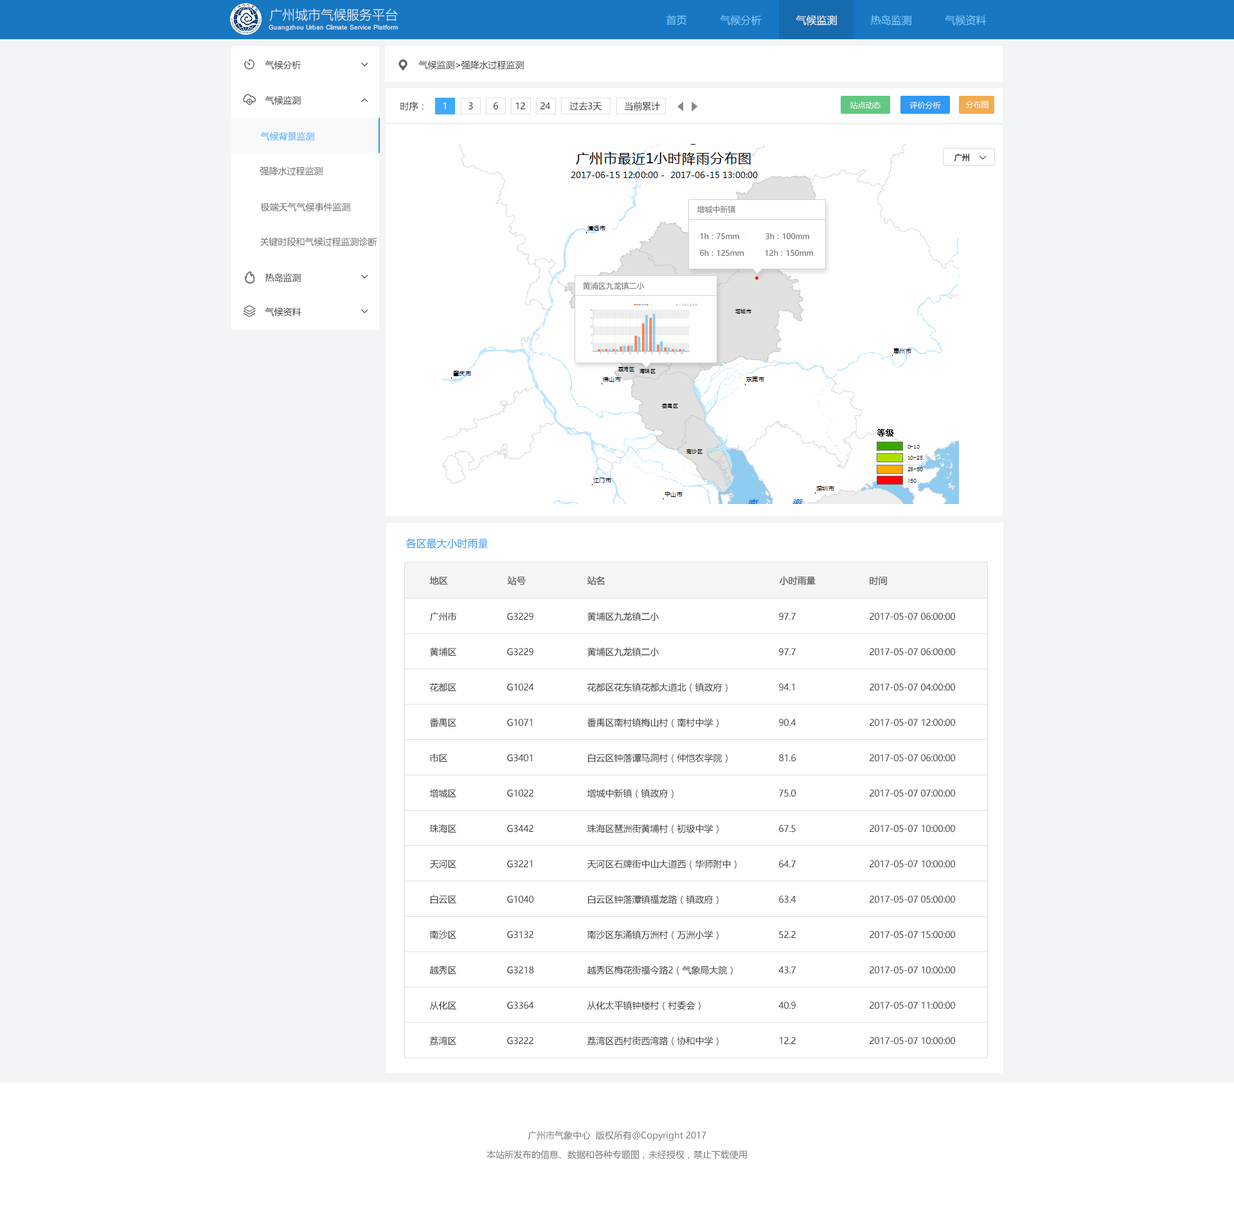
<style>
.page{position:relative;width:1234px;height:1206px;background:#f3f4f5}
.page>*{position:absolute;margin:0}
.t1{font:12.9px "MicrosoftYaHeiLight";color:#ffffff}
.t2{font:10.3px "MicrosoftYaHei";color:#80ceff}
.t3{font:10.3px "MicrosoftYaHei";color:#ffffff}
.t4{font:6.4px "ArialMT";color:#ffffff}
.t5{font:9px "MicrosoftYaHei";color:#333333}
.t6{font:7.7px "MicrosoftYaHei";color:#ffffff}
.t7{font:9px "MicrosoftYaHei";color:#ffffff}
.t8{font:9px "MicrosoftYaHei";color:#3fa9fe}
.t9{font:7.7px "MicrosoftYaHei";color:#333333;font-weight:bold}
.t10{font:9px "MicrosoftYaHei";color:#666666}
.t11{font:7.7px "MicrosoftYaHei";color:#666666}
.t12{font:10.3px "MicrosoftYaHei";color:#2e9af3}
.t13{font:9px "MicrosoftYaHei";color:#666666;font-weight:bold}
</style>
<div class="page">
<p class="t1" style="left:269px;top:8px;width:129px;height:13px">广州城市气候服务平台</p>
<p class="t2" style="left:667px;top:15px;width:20px;height:11px">首页</p>
<p class="t2" style="left:720px;top:15px;width:42px;height:11px">气候分析</p>
<p class="t3" style="left:796px;top:15px;width:41px;height:11px">气候监测</p>
<p class="t2" style="left:871px;top:15px;width:41px;height:11px">热岛监测</p>
<p class="t2" style="left:945px;top:15px;width:42px;height:11px">气候资料</p>
<p class="t4" style="left:269px;top:24px;width:129px;height:7px">Guangzhou Urban Climate Service Platform</p>
<p class="t5" style="left:265px;top:60px;width:37px;height:9px">气候分析</p>
<p class="t5" style="left:419px;top:60px;width:105px;height:9px">气候监测&gt;强降水过程监测</p>
<p class="t5" style="left:265px;top:96px;width:36px;height:9px">气候监测</p>
<p class="t5" style="left:401px;top:102px;width:23px;height:9px">时序：</p>
<p class="t5" style="left:570px;top:102px;width:32px;height:9px">过去3天</p>
<p class="t5" style="left:625px;top:102px;width:35px;height:9px">当前累计</p>
<p class="t6" style="left:850px;top:102px;width:31px;height:7px">站点动态</p>
<p class="t6" style="left:910px;top:101px;width:31px;height:8px">评价分析</p>
<p class="t6" style="left:966px;top:100px;width:23px;height:9px">分布图</p>
<p class="t7" style="left:443px;top:102px;width:3px;height:7px">1</p>
<p class="t5" style="left:469px;top:102px;width:4px;height:8px">3</p>
<p class="t5" style="left:494px;top:102px;width:4px;height:8px">6</p>
<p class="t5" style="left:516px;top:102px;width:9px;height:7px">12</p>
<p class="t5" style="left:541px;top:102px;width:10px;height:7px">24</p>
<p class="t8" style="left:260px;top:132px;width:54px;height:9px">气候背景监测</p>
<p class="t9" style="left:954px;top:154px;width:15px;height:7px">广州</p>
<p class="t10" style="left:260px;top:166px;width:63px;height:10px">强降水过程监测</p>
<p class="t10" style="left:260px;top:203px;width:90px;height:9px">极端天气气候事件监测</p>
<p class="t11" style="left:697px;top:206px;width:39px;height:7px">增城中新镇</p>
<p class="t11" style="left:700px;top:233px;width:109px;height:6px">1h：75mm          3h：100mm</p>
<p class="t10" style="left:260px;top:237px;width:117px;height:9px">关键时段和气候过程监测诊断</p>
<p class="t11" style="left:700px;top:249px;width:113px;height:7px">6h：125mm        12h：150mm</p>
<p class="t5" style="left:266px;top:273px;width:35px;height:9px">热岛监测</p>
<p class="t11" style="left:583px;top:282px;width:62px;height:8px">黄浦区九龙镇二小</p>
<p class="t5" style="left:265px;top:307px;width:37px;height:9px">气候资料</p>
<p class="t12" style="left:406px;top:538px;width:82px;height:11px">各区最大小时雨量</p>
<p class="t13" style="left:429px;top:576px;width:19px;height:9px">地区</p>
<p class="t13" style="left:507px;top:576px;width:19px;height:9px">站号</p>
<p class="t13" style="left:587px;top:576px;width:18px;height:9px">站名</p>
<p class="t13" style="left:779px;top:576px;width:37px;height:9px">小时雨量</p>
<p class="t13" style="left:870px;top:576px;width:17px;height:9px">时间</p>
<p class="t5" style="left:429px;top:612px;width:28px;height:9px">广州市</p>
<p class="t5" style="left:507px;top:613px;width:27px;height:7px">G3229</p>
<p class="t5" style="left:588px;top:612px;width:72px;height:9px">黄埔区九龙镇二小</p>
<p class="t5" style="left:779px;top:613px;width:17px;height:7px">97.7</p>
<p class="t5" style="left:870px;top:613px;width:85px;height:7px">2017-05-07 06:00:00</p>
<p class="t5" style="left:430px;top:647px;width:26px;height:9px">黄埔区</p>
<p class="t5" style="left:507px;top:648px;width:27px;height:8px">G3229</p>
<p class="t5" style="left:588px;top:647px;width:72px;height:9px">黄埔区九龙镇二小</p>
<p class="t5" style="left:779px;top:648px;width:17px;height:8px">97.7</p>
<p class="t5" style="left:870px;top:648px;width:85px;height:8px">2017-05-07 06:00:00</p>
<p class="t5" style="left:429px;top:683px;width:27px;height:9px">花都区</p>
<p class="t5" style="left:507px;top:683px;width:27px;height:8px">G1024</p>
<p class="t5" style="left:587px;top:683px;width:141px;height:9px">花都区花东镇花都大道北（镇政府）</p>
<p class="t5" style="left:779px;top:683px;width:16px;height:8px">94.1</p>
<p class="t5" style="left:870px;top:683px;width:85px;height:8px">2017-05-07 04:00:00</p>
<p class="t5" style="left:429px;top:718px;width:27px;height:9px">番禺区</p>
<p class="t5" style="left:507px;top:719px;width:25px;height:7px">G1071</p>
<p class="t5" style="left:587px;top:718px;width:132px;height:10px">番禹区南村镇梅山村（南村中学）</p>
<p class="t5" style="left:779px;top:719px;width:18px;height:7px">90.4</p>
<p class="t5" style="left:870px;top:719px;width:85px;height:7px">2017-05-07 12:00:00</p>
<p class="t5" style="left:429px;top:753px;width:18px;height:9px">市区</p>
<p class="t5" style="left:507px;top:754px;width:25px;height:8px">G3401</p>
<p class="t5" style="left:588px;top:753px;width:140px;height:10px">白云区钟落谭马洞村（仲恺农学院）</p>
<p class="t5" style="left:779px;top:754px;width:17px;height:8px">81.6</p>
<p class="t5" style="left:870px;top:754px;width:85px;height:8px">2017-05-07 06:00:00</p>
<p class="t5" style="left:429px;top:789px;width:27px;height:9px">增城区</p>
<p class="t5" style="left:507px;top:789px;width:27px;height:8px">G1022</p>
<p class="t5" style="left:587px;top:789px;width:87px;height:9px">增城中新镇（镇政府）</p>
<p class="t5" style="left:779px;top:789px;width:17px;height:8px">75.0</p>
<p class="t5" style="left:870px;top:789px;width:85px;height:8px">2017-05-07 07:00:00</p>
<p class="t5" style="left:429px;top:824px;width:27px;height:9px">珠海区</p>
<p class="t5" style="left:507px;top:825px;width:27px;height:8px">G3442</p>
<p class="t5" style="left:587px;top:824px;width:132px;height:10px">珠海区琶洲街黄埔村（初级中学）</p>
<p class="t5" style="left:779px;top:825px;width:17px;height:8px">67.5</p>
<p class="t5" style="left:870px;top:825px;width:85px;height:8px">2017-05-07 10:00:00</p>
<p class="t5" style="left:429px;top:860px;width:27px;height:9px">天河区</p>
<p class="t5" style="left:507px;top:860px;width:25px;height:8px">G3221</p>
<p class="t5" style="left:587px;top:860px;width:150px;height:9px">天河区石牌街中山大道西（华师附中）</p>
<p class="t5" style="left:779px;top:860px;width:17px;height:8px">64.7</p>
<p class="t5" style="left:870px;top:860px;width:85px;height:8px">2017-05-07 10:00:00</p>
<p class="t5" style="left:431px;top:895px;width:25px;height:9px">白云区</p>
<p class="t5" style="left:507px;top:896px;width:27px;height:7px">G1040</p>
<p class="t5" style="left:588px;top:895px;width:131px;height:10px">白云区钟落潭镇福龙路（镇政府）</p>
<p class="t5" style="left:779px;top:896px;width:18px;height:7px">63.4</p>
<p class="t5" style="left:870px;top:896px;width:85px;height:7px">2017-05-07 05:00:00</p>
<p class="t5" style="left:430px;top:930px;width:26px;height:9px">南沙区</p>
<p class="t5" style="left:507px;top:931px;width:27px;height:8px">G3132</p>
<p class="t5" style="left:588px;top:930px;width:131px;height:10px">南沙区东涌镇万洲村（万洲小学）</p>
<p class="t5" style="left:779px;top:931px;width:17px;height:8px">52.2</p>
<p class="t5" style="left:870px;top:931px;width:85px;height:8px">2017-05-07 15:00:00</p>
<p class="t5" style="left:429px;top:966px;width:27px;height:9px">越秀区</p>
<p class="t5" style="left:587px;top:966px;width:146px;height:9px">越秀区梅花街福今路2（气象局大院）</p>
<p class="t5" style="left:507px;top:966px;width:27px;height:8px">G3218</p>
<p class="t5" style="left:779px;top:966px;width:17px;height:8px">43.7</p>
<p class="t5" style="left:870px;top:966px;width:85px;height:8px">2017-05-07 10:00:00</p>
<p class="t5" style="left:429px;top:1001px;width:27px;height:9px">从化区</p>
<p class="t5" style="left:507px;top:1002px;width:27px;height:7px">G3364</p>
<p class="t5" style="left:587px;top:1001px;width:114px;height:10px">从化太平镇钟楼村（村委会）</p>
<p class="t5" style="left:779px;top:1002px;width:17px;height:7px">40.9</p>
<p class="t5" style="left:870px;top:1002px;width:85px;height:7px">2017-05-07 11:00:00</p>
<p class="t5" style="left:429px;top:1036px;width:27px;height:9px">荔湾区</p>
<p class="t5" style="left:507px;top:1037px;width:27px;height:8px">G3222</p>
<p class="t5" style="left:587px;top:1036px;width:132px;height:10px">荔湾区西村街西湾路（协和中学）</p>
<p class="t5" style="left:780px;top:1037px;width:16px;height:8px">12.2</p>
<p class="t5" style="left:870px;top:1037px;width:85px;height:8px">2017-05-07 10:00:00</p>
</div>
